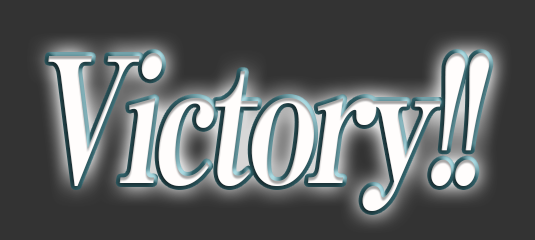
<style>
.page{position:relative;width:535px;height:240px;background:#333333}
.page>*{position:absolute;margin:0}
.t1{font:174px "RyuminPro-ExBold";letter-spacing:-0.08em;color:#fffdfc;font-style:italic;scale:0.75 1}
</style>
<div class="page">
<p class="t1" style="left:48px;top:53px;width:442px;height:158px">Victory!!</p>
</div>
